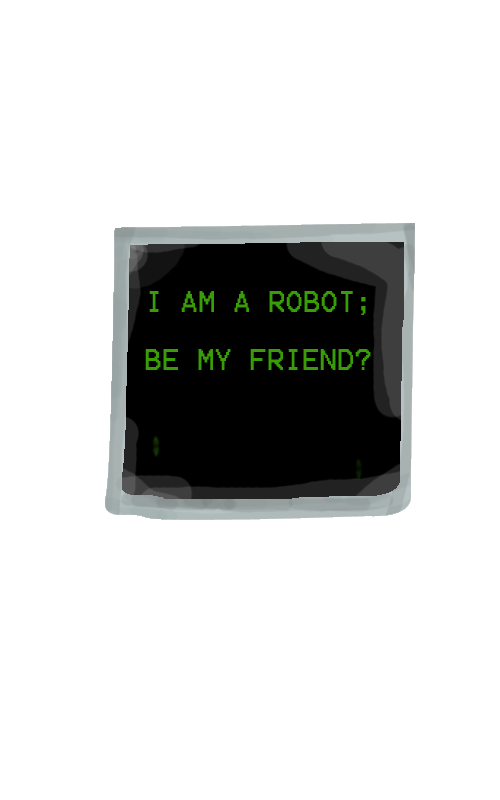
<style>
.page{position:relative;width:500px;height:800px;background:#ffffff}
.page>*{position:absolute;margin:0}
.t1{font:24px "Terminal";color:#389d06}
.t2{font:21.7px "Vrinda-Bold";color:#389d06}
</style>
<div class="page">
<p class="t1" style="left:145px;top:291px;width:226px;height:79px"><span class="t2"><br><br></span>I AM A ROBOT;                           <br><br>BE MY FRIEND?</p>
</div>
